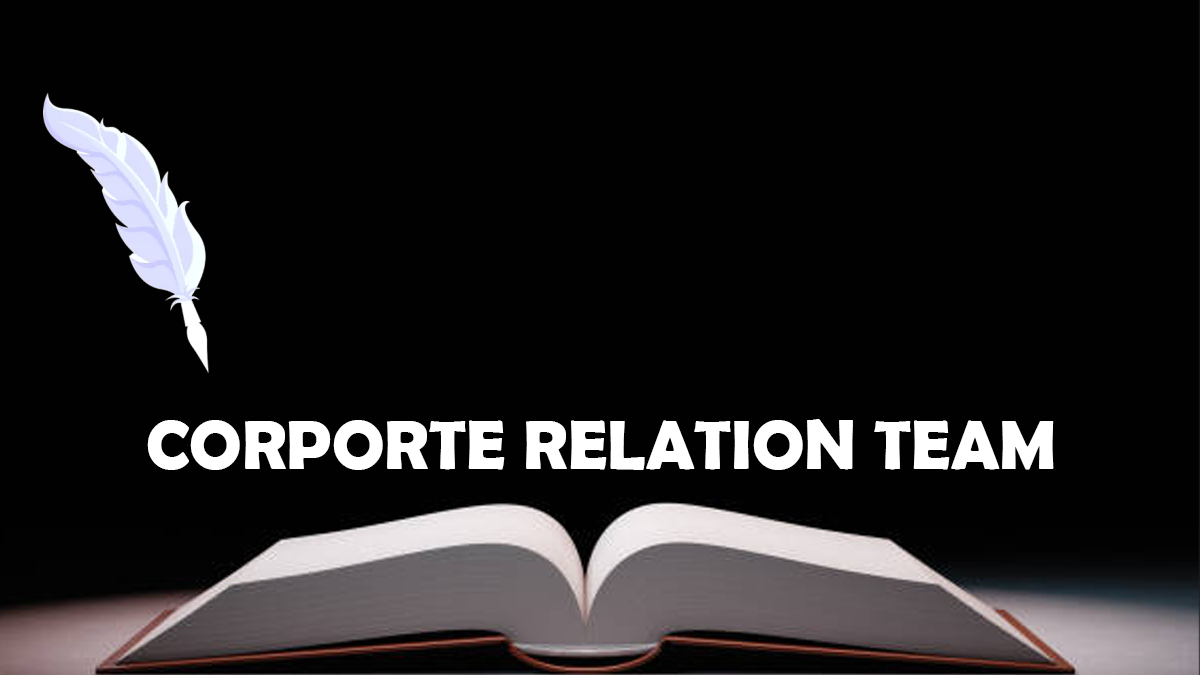
<style>
.page{position:relative;width:1200px;height:675px;background:#010101}
.page>*{position:absolute;margin:0}
.t1{font:70px "BerlinSansFBDemi-Bold";color:#ffffff}
</style>
<div class="page">
<p class="t1" style="left:147px;top:419px;width:907px;height:51px">CORPORTE RELATION TEAM</p>
</div>
